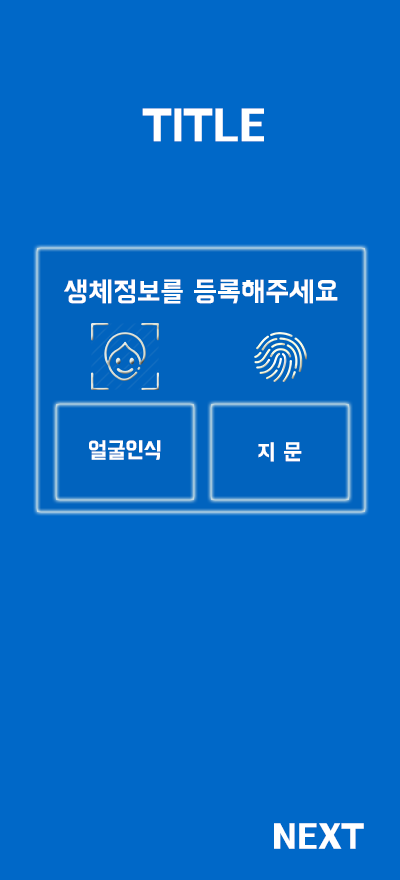
<style>
.page{position:relative;width:400px;height:880px;background:#0068c8}
.page>*{position:absolute;margin:0}
.t1{font:45px "BMHANNAPro";color:#ffffff}
.t2{font:28px "BMHANNAPro";color:#ffffff}
.t3{font:23.1px "BMHANNAPro";color:#ffffff}
.t4{font:35px "BMHANNAPro";color:#ffffff}
</style>
<div class="page">
<p class="t1" style="left:142px;top:108px;width:122px;height:34px">TITLE</p>
<p class="t2" style="left:64px;top:279px;width:274px;height:25px">생체정보를 등록해주세요</p>
<p class="t3" style="left:89px;top:440px;width:72px;height:20px">얼굴인식</p>
<p class="t3" style="left:258px;top:442px;width:44px;height:20px">지 문</p>
<p class="t4" style="left:274px;top:823px;width:90px;height:26px">NEXT</p>
</div>
